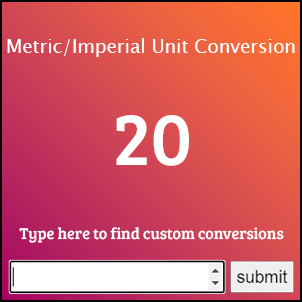
<style>
.page{position:relative;width:302px;height:302px}
.page>*{position:absolute;margin:0}
.t1{font:18.7px "LucidaSansUnicode";color:#ffffff}
.t2{font:76px "BreeSerif-Regular";color:#ffffff}
.t3{font:16px "BreeSerif-Regular";color:#ffffff}
</style>
<div class="page">
<p class="t1" style="left:7px;top:38px;width:288px;height:19px">Metric/Imperial Unit Conversion</p>
<p class="t2" style="left:116px;top:115px;width:73px;height:51px">20</p>
<p class="t3" style="left:19px;top:227px;width:265px;height:16px">Type here to find custom conversions</p>
</div>
